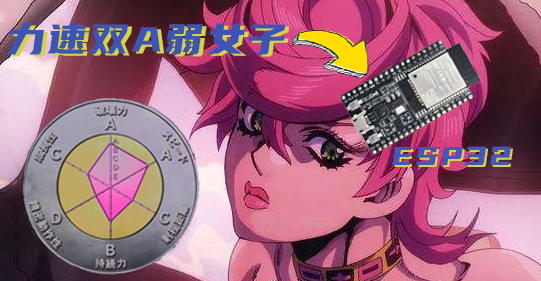
<style>
.page{position:relative;width:541px;height:281px}
.page>*{position:absolute;margin:0}
.t1{font:42.7px "YouSheBiaoTiHei";letter-spacing:0.05em;color:#3c55b4}
.t2{font:42.7px "YouSheBiaoTiHei";letter-spacing:0.05em}
.t3{font:32px "YouSheBiaoTiHei";letter-spacing:0.05em;color:#4655b7}
.t4{font:32px "YouSheBiaoTiHei";letter-spacing:0.05em}
</style>
<div class="page">
<p class="t1" style="left:7px;top:23px;width:279px;height:32px">力速双A弱女子</p>
<p class="t2" style="left:11px;top:25px;width:279px;height:32px">力速双A弱女子</p>
<p class="t3" style="left:392px;top:146px;width:119px;height:19px">ESP32</p>
<p class="t4" style="left:394px;top:148px;width:119px;height:19px">ESP32</p>
</div>
